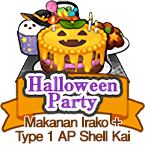
<style>
.page{position:relative;width:145px;height:154px;background:#ffffff}
.page>*{position:absolute;margin:0}
.t1{font:14px/14px "FutoGoB101Pr5-Bold";letter-spacing:-0.08em;color:#703300;font-weight:bold}
</style>
<div class="page">
<p class="t1" style="left:15px;top:116px;width:115px;height:28px;text-align:center">Makanan Irako +<br>Type 1 AP Shell Kai</p>
</div>
